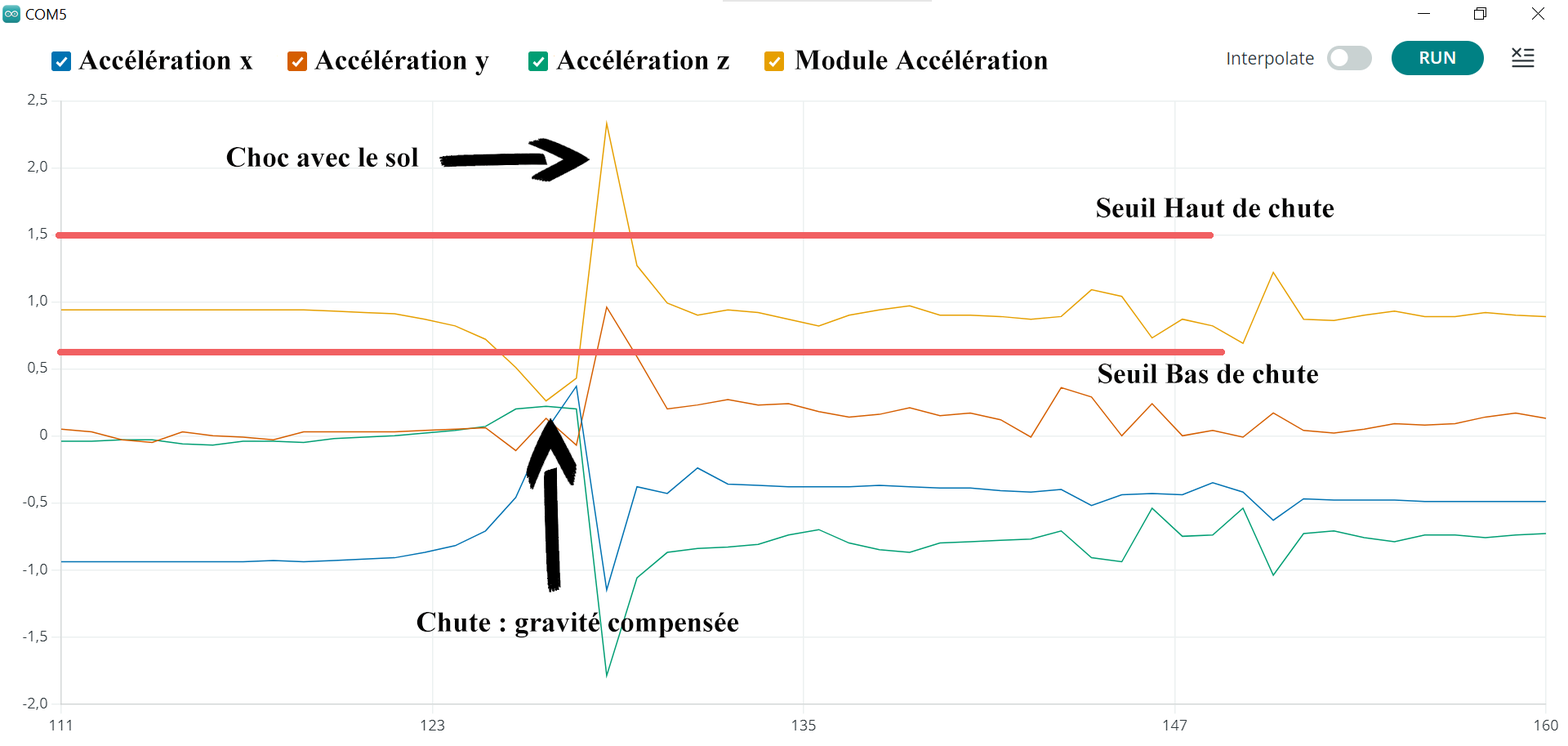
<style>
.page{position:relative;width:1568px;height:746px;background:#ffffff}
.page>*{position:absolute;margin:0}
.t1{font:49px "TimesNewRomanPS-BoldMT";color:#060505}
</style>
<div class="page">
<p class="t1" style="left:78px;top:50px;width:175px;height:20px">Accélération x</p>
<p class="t1" style="left:314px;top:50px;width:175px;height:26px">Accélération y</p>
<p class="t1" style="left:555px;top:50px;width:174px;height:20px">Accélération z</p>
<p class="t1" style="left:795px;top:50px;width:253px;height:20px">Module Accélération</p>
<p class="t1" style="left:226px;top:147px;width:193px;height:20px">Choc avec le sol</p>
<p class="t1" style="left:1097px;top:198px;width:237px;height:20px">Seuil Haut de chute</p>
<p class="t1" style="left:1098px;top:363px;width:220px;height:21px">Seuil Bas de chute</p>
<p class="t1" style="left:416px;top:612px;width:323px;height:26px">Chute : gravité compensée</p>
</div>
